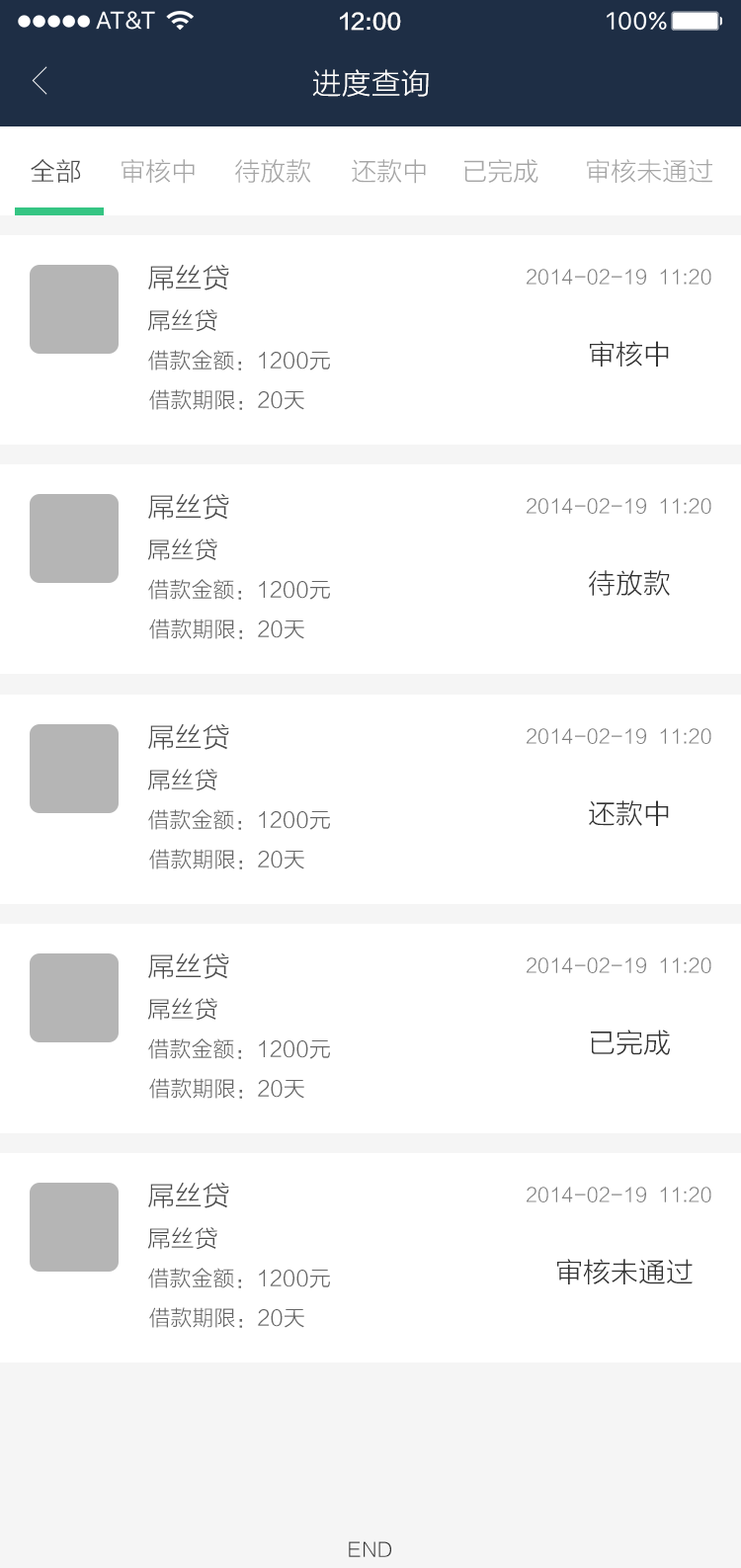
<style>
.page{position:relative;width:741px;height:1568px;background:#ffffff}
.page>*{position:absolute;margin:0}
.t1{font:21.7px "FZLTZHK--GBK1-0";color:#ffffff}
.t2{font:29.6px "FZLTXHK";color:#ffffff}
.t3{font:25.7px "FZLTXHK";color:#4d4d4d}
.t4{font:25.7px "FZLTXHK";color:#a6a6a6}
.t5{font:27.7px "FZLTXHK";color:#4d4d4d}
.t6{font:19.8px "FZLTXHK";color:#808080}
.t7{font:23.7px "FZLTXHK";color:#4d4d4d}
.t8{font:27.7px "FZLTXHK";color:#333333}
.t9{font:21.7px "FZLTXHK";color:#666666}
.t10{font:19.8px "FZLTXHK";color:#333333}
</style>
<div class="page">
<p class="t1" style="left:340px;top:12px;width:61px;height:19px">12:00</p>
<p class="t2" style="left:312px;top:69px;width:117px;height:28px">进度查询</p>
<p class="t3" style="left:31px;top:159px;width:50px;height:24px">全部</p>
<p class="t4" style="left:122px;top:159px;width:73px;height:25px">审核中</p>
<p class="t4" style="left:235px;top:159px;width:76px;height:24px">待放款</p>
<p class="t4" style="left:352px;top:159px;width:74px;height:25px">还款中</p>
<p class="t4" style="left:464px;top:159px;width:74px;height:24px">已完成</p>
<p class="t4" style="left:587px;top:159px;width:126px;height:24px">审核未通过</p>
<p class="t5" style="left:148px;top:264px;width:81px;height:26px">屌丝贷</p>
<p class="t6" style="left:527px;top:269px;width:184px;height:16px">2014-02-19  11:20</p>
<p class="t7" style="left:148px;top:309px;width:69px;height:23px">屌丝贷</p>
<p class="t8" style="left:590px;top:341px;width:79px;height:26px">审核中</p>
<p class="t9" style="left:148px;top:350px;width:182px;height:21px">借款金额：1200元</p>
<p class="t9" style="left:149px;top:389px;width:155px;height:21px">借款期限：20天</p>
<p class="t5" style="left:148px;top:493px;width:81px;height:27px">屌丝贷</p>
<p class="t6" style="left:527px;top:498px;width:184px;height:16px">2014-02-19  11:20</p>
<p class="t7" style="left:148px;top:538px;width:69px;height:23px">屌丝贷</p>
<p class="t9" style="left:148px;top:579px;width:182px;height:21px">借款金额：1200元</p>
<p class="t8" style="left:589px;top:570px;width:81px;height:26px">待放款</p>
<p class="t9" style="left:149px;top:619px;width:155px;height:20px">借款期限：20天</p>
<p class="t5" style="left:148px;top:723px;width:81px;height:27px">屌丝贷</p>
<p class="t6" style="left:527px;top:728px;width:184px;height:16px">2014-02-19  11:20</p>
<p class="t7" style="left:148px;top:769px;width:69px;height:22px">屌丝贷</p>
<p class="t9" style="left:148px;top:809px;width:182px;height:21px">借款金额：1200元</p>
<p class="t8" style="left:589px;top:800px;width:80px;height:26px">还款中</p>
<p class="t9" style="left:149px;top:849px;width:155px;height:20px">借款期限：20天</p>
<p class="t5" style="left:148px;top:952px;width:81px;height:27px">屌丝贷</p>
<p class="t6" style="left:527px;top:957px;width:184px;height:16px">2014-02-19  11:20</p>
<p class="t7" style="left:148px;top:998px;width:69px;height:23px">屌丝贷</p>
<p class="t8" style="left:591px;top:1030px;width:79px;height:25px">已完成</p>
<p class="t9" style="left:148px;top:1038px;width:182px;height:21px">借款金额：1200元</p>
<p class="t9" style="left:149px;top:1078px;width:155px;height:21px">借款期限：20天</p>
<p class="t5" style="left:148px;top:1182px;width:81px;height:26px">屌丝贷</p>
<p class="t6" style="left:527px;top:1187px;width:184px;height:15px">2014-02-19  11:20</p>
<p class="t7" style="left:148px;top:1227px;width:69px;height:23px">屌丝贷</p>
<p class="t8" style="left:557px;top:1259px;width:136px;height:25px">审核未通过</p>
<p class="t9" style="left:148px;top:1268px;width:182px;height:20px">借款金额：1200元</p>
<p class="t9" style="left:149px;top:1307px;width:155px;height:21px">借款期限：20天</p>
<p class="t10" style="left:349px;top:1541px;width:42px;height:16px">END</p>
</div>
